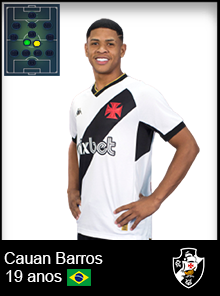
<style>
.page{position:relative;width:220px;height:296px;background:#ffffff}
.page>*{position:absolute;margin:0}
.t1{font:16px "ArialMT";color:#ffffff}
</style>
<div class="page">
<p class="t1" style="left:4px;top:252px;width:99px;height:12px">Cauan Barros</p>
<p class="t1" style="left:6px;top:270px;width:56px;height:12px">19 anos</p>
</div>
